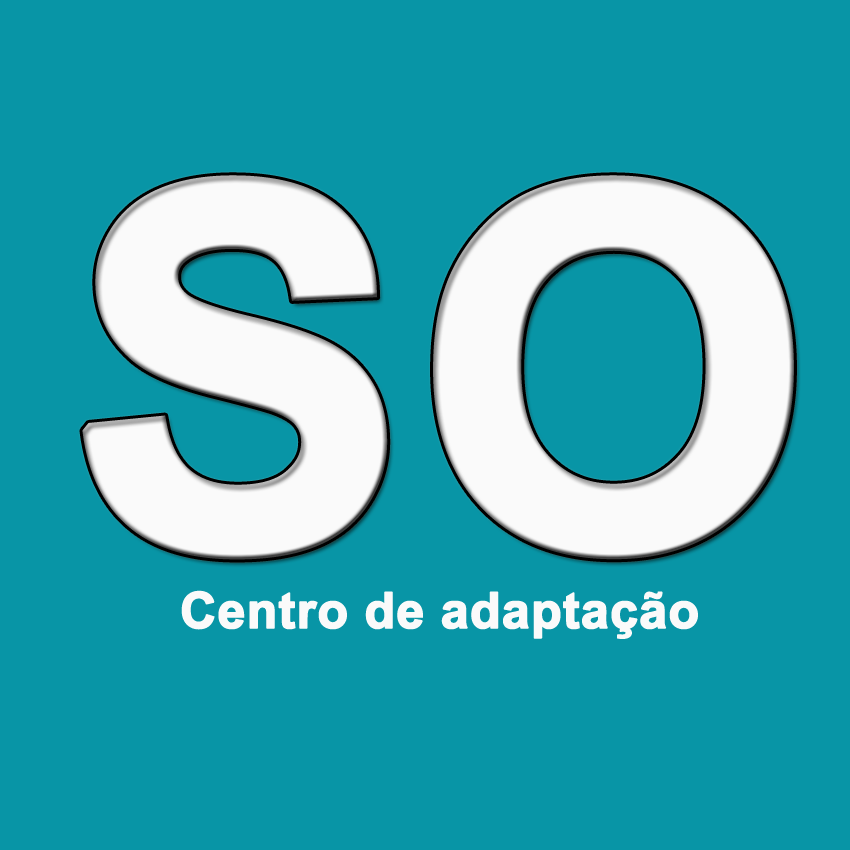
<style>
.page{position:relative;width:850px;height:850px;background:#0895a6}
.page>*{position:absolute;margin:0}
.t1{font:500px "Arial-BoldMT";color:#fafafa;font-weight:bold}
.t2{font:50px "Arial-BoldMT";color:#fafafa;font-weight:bold}
</style>
<div class="page">
<p class="t1" style="left:82px;top:175px;width:712px;height:385px">SO</p>
<p class="t2" style="left:181px;top:590px;width:517px;height:49px">Centro de adaptação</p>
</div>
